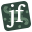
<style>
.page{position:relative;width:32px;height:32px;background:#31473d}
.page>*{position:absolute;margin:0}
.t1{font:25.7px "Times-Roman"}
.t2{font:25.7px "Times-Roman";color:#ffffff}
</style>
<div class="page">
<p class="t1" style="left:5px;top:6px;width:24px;height:19px;rotate:90deg">jf</p>
<p class="t1" style="left:6px;top:4px;width:20px;height:24px;rotate:180deg">jf</p>
<p class="t2" style="left:6px;top:4px;width:20px;height:24px">jf</p>
</div>
